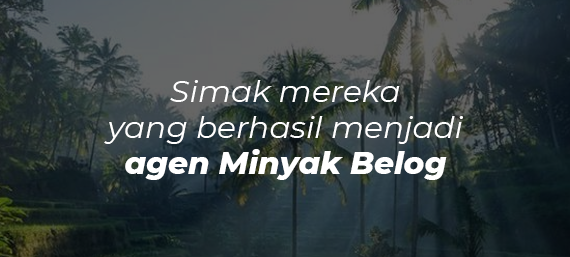
<style>
.page{position:relative;width:570px;height:257px}
.page>*{position:absolute;margin:0}
.t1{font:30px "Montserrat-Italic";color:#ffffff;scale:1.04 1}
.t2{font:30px "Montserrat-ExtraBoldItalic";color:#ffffff;scale:1.04 1}
</style>
<div class="page">
<p class="t1" style="left:104px;top:80px;width:359px;height:100px;text-align:center">Simak mereka<br>yang berhasil menjadi<br><span class="t2">agen Minyak Belog</span></p>
</div>
